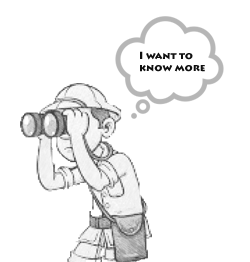
<style>
.page{position:relative;width:250px;height:262px;background:#ffffff}
.page>*{position:absolute;margin:0}
.t1{font:10px "LithosPro-Black";color:#101010}
</style>
<div class="page">
<p class="t1" style="left:140px;top:51px;width:65px;height:21px">I want to <br>know more</p>
</div>
